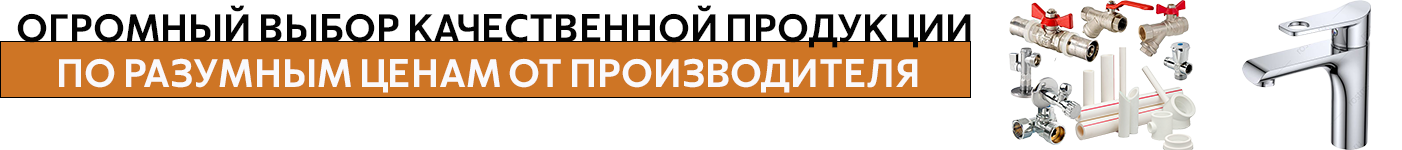
<style>
.page{position:relative;width:1402px;height:150px;background:#ffffff}
.page>*{position:absolute;margin:0}
.t1{font:37.9px "CapturaNow-Medium";color:#040404;text-transform:uppercase}
.t2{font:37.9px "CapturaNow-Medium";color:#f9f9fc;text-transform:uppercase}
</style>
<div class="page">
<p class="t1" style="left:17px;top:5px;width:954px;height:88px">Огромный выбор качественной продукции<br><span class="t2">      ПО РАЗУМНЫМ ЦЕНАМ ОТ ПРОИЗВОДИТЕЛЯ</span></p>
</div>
